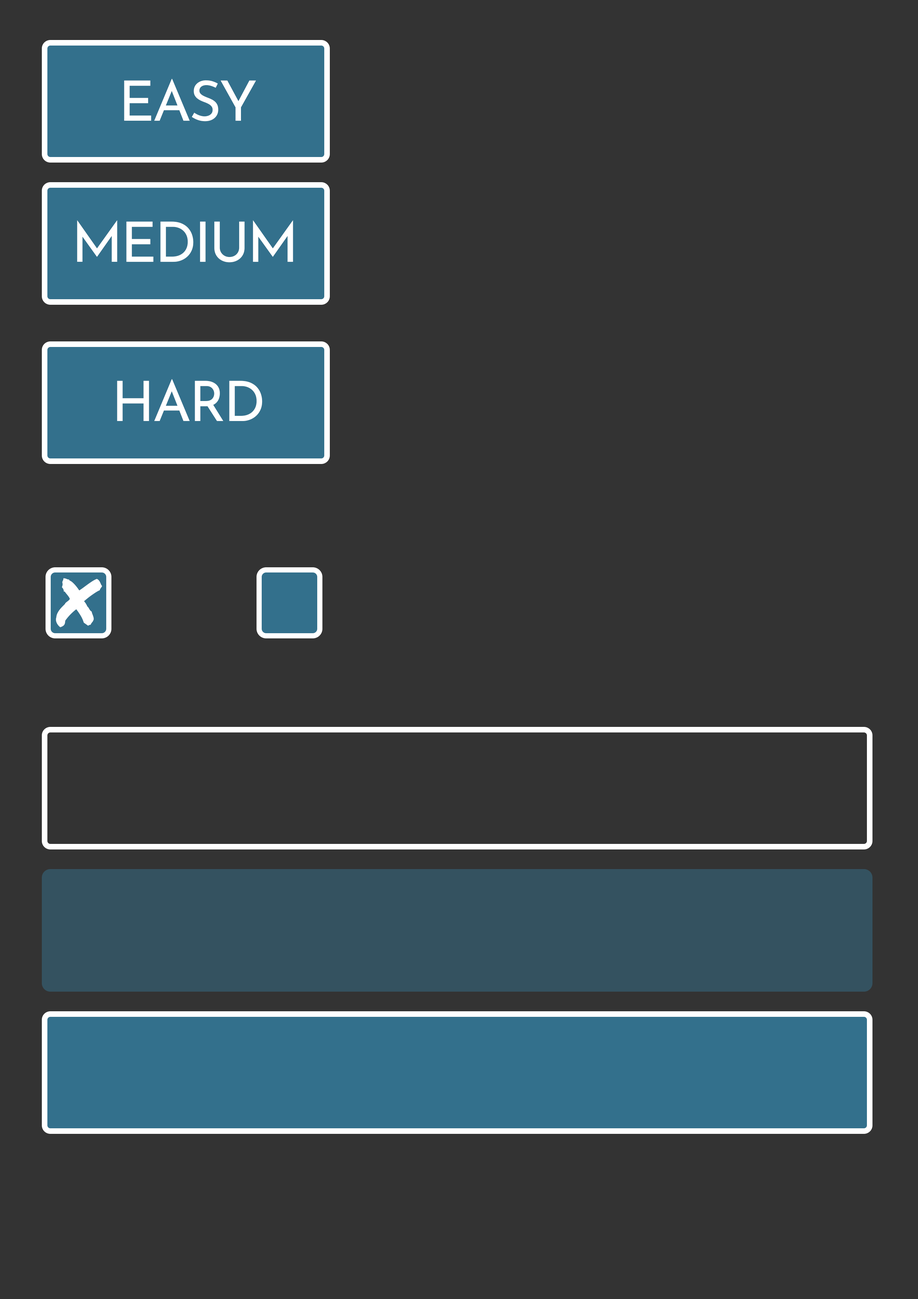
<style>
.page{position:relative;width:918px;height:1299px;background:#333333}
.page>*{position:absolute;margin:0}
.t1{font:55.5px "JosefinSans-Regular";letter-spacing:-0.04em;color:#ffffff}
.t2{font:65.6px "PermanentMarker-Regular";letter-spacing:-0.04em;color:#ffffff}
</style>
<div class="page">
<p class="t1" style="left:124px;top:79px;width:132px;height:42px">EASY</p>
<p class="t1" style="left:77px;top:220px;width:216px;height:42px">MEDIUM</p>
<p class="t1" style="left:117px;top:379px;width:145px;height:42px">HARD</p>
<p class="t2" style="left:56px;top:578px;width:46px;height:49px">X</p>
</div>
